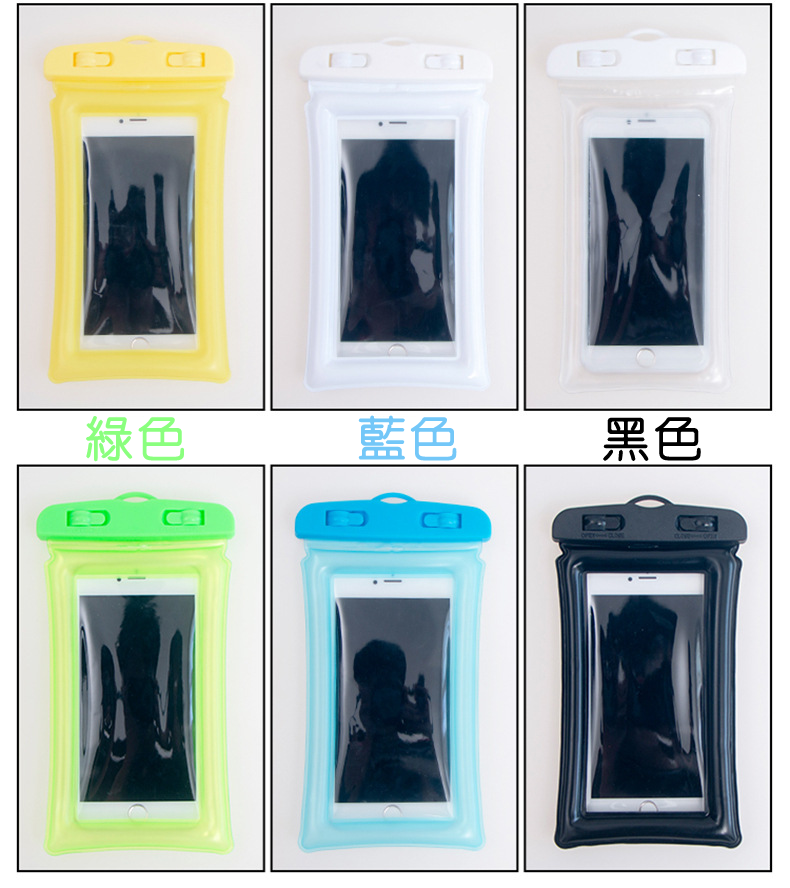
<style>
.page{position:relative;width:790px;height:888px}
.page>*{position:absolute;margin:0}
.t1{font:48px "HanWangYenLight";letter-spacing:0.05em;color:#8aff7e;font-weight:bold}
.t2{font:48px "HanWangYenLight";letter-spacing:0.05em;color:#73c7f8;font-weight:bold}
.t3{font:48px "HanWangYenLight";letter-spacing:0.05em;color:#000000;font-weight:bold}
</style>
<div class="page">
<p class="t1" style="left:86px;top:415px;width:615px;height:47px">綠色<span class="t2">      藍色     </span><span class="t3">黑色</span></p>
</div>
